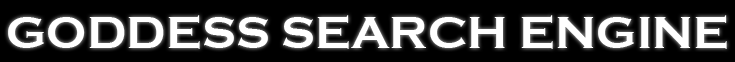
<style>
.page{position:relative;width:735px;height:62px;background:#000000}
.page>*{position:absolute;margin:0}
.t1{font:47.1px "CopperplateBeckerBold";color:#ffffff}
</style>
<div class="page">
<p class="t1" style="left:8px;top:15px;width:719px;height:34px">GODDESS SEARCH ENGINE</p>
</div>
